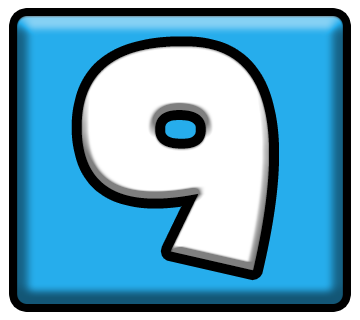
<style>
.page{position:relative;width:360px;height:320px;background:#26adec}
.page>*{position:absolute;margin:0}
.t1{font:332.2px "Funhouse";color:#ffffff;scale:0.89 1}
</style>
<div class="page">
<p class="t1" style="left:81px;top:46px;width:188px;height:225px;rotate:2deg">9</p>
</div>
